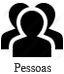
<style>
.page{position:relative;width:64px;height:74px;background:#ffffff}
.page>*{position:absolute;margin:0}
.t1{font:12px "TimesNewRomanPSMT";color:#333333}
</style>
<div class="page">
<p class="t1" style="left:14px;top:63px;width:38px;height:9px">Pessoas</p>
</div>
